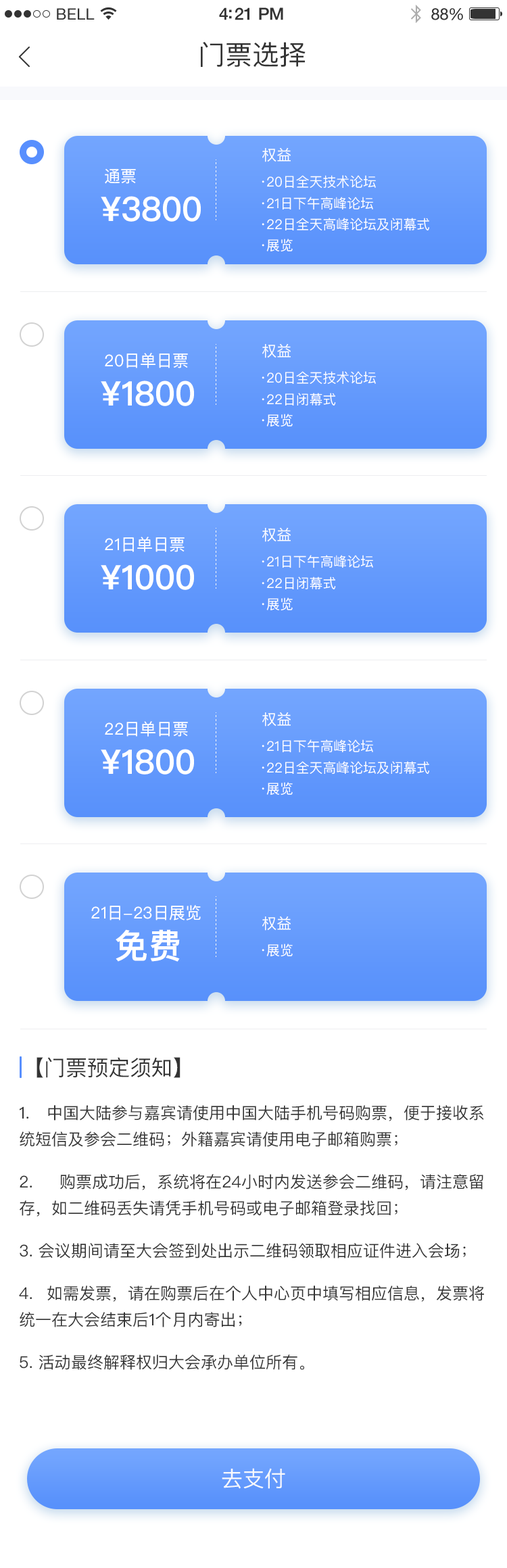
<style>
.page{position:relative;width:507px;height:1568px;background:#ffffff}
.page>*{position:absolute;margin:0}
.t1{font:15.5px "HelveticaNeue";letter-spacing:0.02em;color:#333333}
.t2{font:16.9px "HelveticaNeue-Medium";letter-spacing:-0.02em;color:#333333}
.t3{font:16.2px "HelveticaNeue";letter-spacing:-0.02em;color:#333333}
.t4{font:27px "PingFangSC-Regular";color:#333333}
.t5{font:15px "PingFangSC-Regular";color:#ffffff;text-transform:uppercase}
.t6{font:16.2px "PingFangSC-Regular";color:#ffffff}
.t7{font:13.5px/21.1px "PingFangSC-Regular";color:#ffffff;text-transform:uppercase}
.t8{font:33.8px "PingFangSC-Semibold";color:#ffffff}
.t9{font:13.5px "PingFangSC-Regular";color:#ffffff;text-transform:uppercase}
.t10{font:21.6px "PingFangSC-Regular";color:#333333;text-transform:uppercase}
.t11{font:16.2px/26.3px "PingFangSC-Regular";color:#333333;text-transform:uppercase}
.t12{font:21.6px "PingFangSC-Regular";color:#f8f9fc}
</style>
<div class="page">
<p class="t1" style="left:57px;top:8px;width:38px;height:12px">BELL</p>
<p class="t2" style="left:219px;top:7px;width:64px;height:13px">4:21 PM</p>
<p class="t3" style="left:431px;top:8px;width:32px;height:12px">88%</p>
<p class="t4" style="left:201px;top:42px;width:104px;height:26px">门票选择</p>
<p class="t5" style="left:262px;top:147px;width:29px;height:15px">权益</p>
<p class="t6" style="left:105px;top:168px;width:31px;height:16px">通票</p>
<p class="t7" style="left:262px;top:175px;width:167px;height:77px">·20日全天技术论坛<br>·21日下午高峰论坛<br>·22日全天高峰论坛及闭幕式<br>·展览</p>
<p class="t8" style="left:101px;top:196px;width:100px;height:26px">¥3800</p>
<p class="t6" style="left:105px;top:353px;width:83px;height:15px">20日单日票</p>
<p class="t5" style="left:262px;top:343px;width:29px;height:15px">权益</p>
<p class="t7" style="left:262px;top:371px;width:114px;height:56px">·20日全天技术论坛<br>·22日闭幕式<br>·展览</p>
<p class="t8" style="left:101px;top:381px;width:93px;height:25px">¥1800</p>
<p class="t5" style="left:262px;top:527px;width:29px;height:15px">权益</p>
<p class="t6" style="left:105px;top:537px;width:80px;height:15px">21日单日票</p>
<p class="t7" style="left:262px;top:555px;width:111px;height:56px">·21日下午高峰论坛<br>·22日闭幕式<br>·展览</p>
<p class="t8" style="left:101px;top:564px;width:93px;height:26px">¥1000</p>
<p class="t5" style="left:262px;top:712px;width:29px;height:15px">权益</p>
<p class="t6" style="left:105px;top:721px;width:83px;height:16px">22日单日票</p>
<p class="t8" style="left:101px;top:749px;width:93px;height:26px">¥1800</p>
<p class="t7" style="left:262px;top:739px;width:167px;height:56px">·21日下午高峰论坛<br>·22日全天高峰论坛及闭幕式<br>·展览</p>
<p class="t6" style="left:91px;top:905px;width:110px;height:16px">21日-23日展览</p>
<p class="t5" style="left:262px;top:916px;width:29px;height:15px">权益</p>
<p class="t8" style="left:116px;top:929px;width:64px;height:33px">免费</p>
<p class="t9" style="left:262px;top:944px;width:31px;height:13px">·展览</p>
<p class="t10" style="left:36px;top:1057px;width:144px;height:21px">【门票预定须知】</p>
<p class="t11" style="left:19px;top:1105px;width:465px;height:265px;text-align:justify">1. 中国大陆参与嘉宾请使用中国大陆手机号码购票，便于接收系统短信及参会二维码；外籍嘉宾请使用电子邮箱购票；<br>2. 购票成功后，系统将在24小时内发送参会二维码，请注意留存，如二维码丢失请凭手机号码或电子邮箱登录找回；<br>3. 会议期间请至大会签到处出示二维码领取相应证件进入会场；<br>4. 如需发票，请在购票后在个人中心页中填写相应信息，发票将统一在大会结束后1个月内寄出；<br>5. 活动最终解释权归大会承办单位所有。</p>
<p class="t12" style="left:222px;top:1468px;width:63px;height:21px">去支付</p>
</div>
